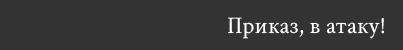
<style>
.page{position:relative;width:403px;height:50px;background:#333333}
.page>*{position:absolute;margin:0}
.t1{font:24px "CrimsonText-Regular";color:#ffffff}
</style>
<div class="page">
<p class="t1" style="left:228px;top:17px;width:156px;height:22px">Приказ, в атаку!</p>
</div>
